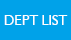
<style>
.page{position:relative;width:71px;height:40px;background:#00a2e9}
.page>*{position:absolute;margin:0}
.t1{font:13.9px "Humanist521BT-Roman";color:#ffffff}
</style>
<div class="page">
<p class="t1" style="left:4px;top:15px;width:64px;height:10px">DEPT LIST</p>
</div>
